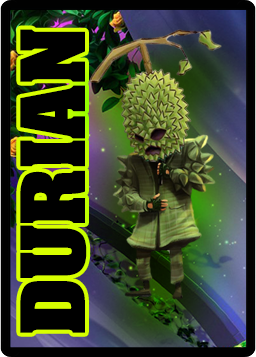
<style>
.page{position:relative;width:256px;height:357px}
.page>*{position:absolute;margin:0}
.t1{font:75px "AardvarkBold";color:#000000}
</style>
<div class="page">
<p class="t1" style="left:20px;top:29px;width:67px;height:304px;rotate:180deg">DURIAN</p>
</div>
